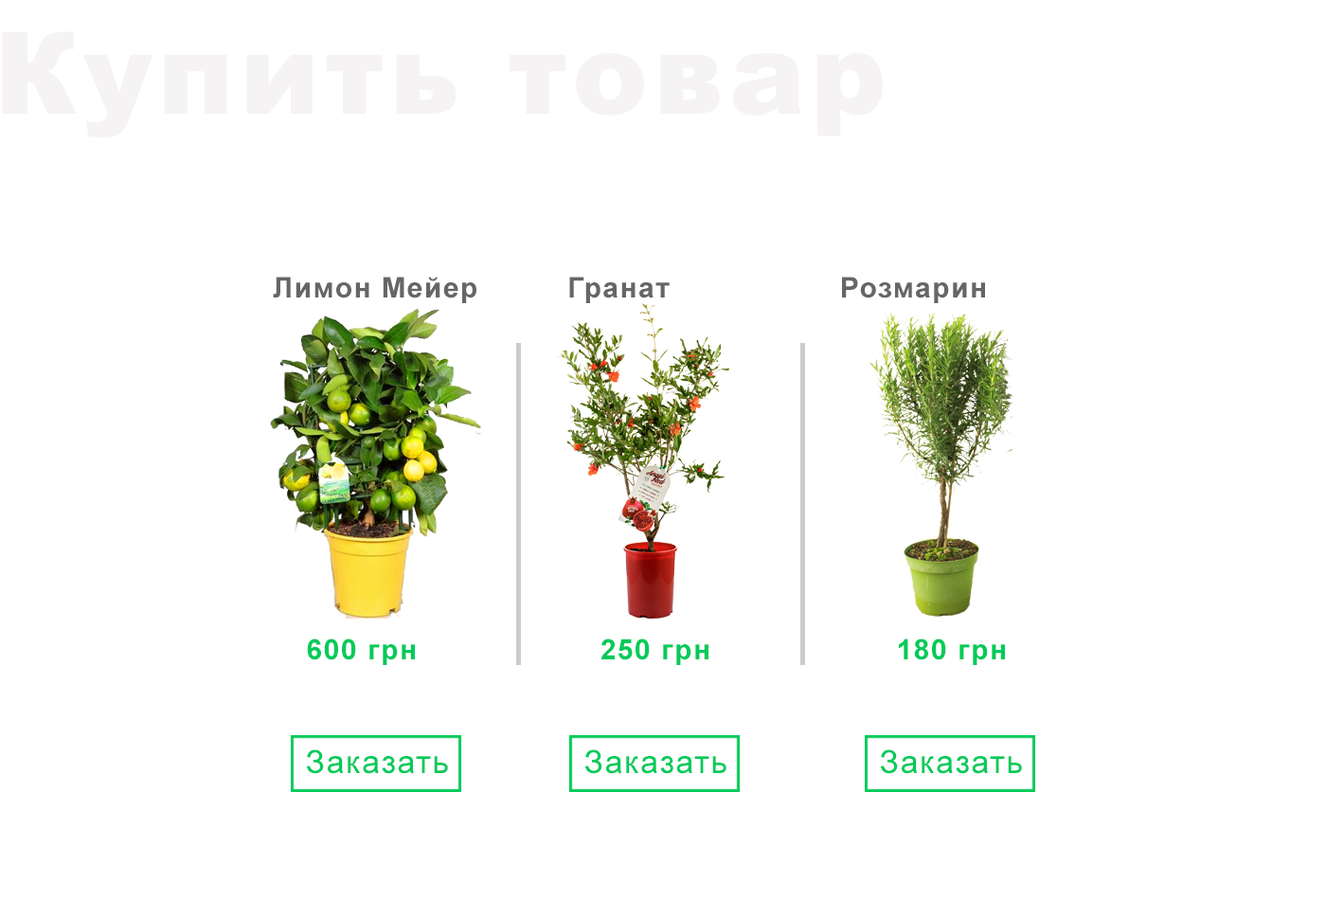
<style>
.page{position:relative;width:1326px;height:900px;background:#ffffff}
.page>*{position:absolute;margin:0}
.t1{font:113.6px "Arial-Black";letter-spacing:0.05em;color:#f5f3f4}
.t2{font:28.4px "Arial-BoldMT";letter-spacing:0.05em;color:#666666}
.t3{font:28.4px "Arial-BoldMT";letter-spacing:0.05em;color:#02cb5a}
.t4{font:32px "ArialMT";letter-spacing:0.05em;color:#02cb5a}
</style>
<div class="page">
<p class="t1" style="left:2px;top:31px;width:880px;height:107px">Купить товар</p>
<p class="t2" style="left:273px;top:276px;width:203px;height:27px">Лимон Мейер</p>
<p class="t2" style="left:569px;top:276px;width:100px;height:27px">Гранат</p>
<p class="t2" style="left:842px;top:276px;width:143px;height:27px">Розмарин</p>
<p class="t3" style="left:307px;top:638px;width:108px;height:27px">600 грн</p>
<p class="t3" style="left:600px;top:638px;width:108px;height:27px">250 грн</p>
<p class="t3" style="left:899px;top:638px;width:106px;height:27px">180 грн</p>
<p class="t4" style="left:306px;top:749px;width:142px;height:25px">Заказать</p>
<p class="t4" style="left:584px;top:749px;width:142px;height:25px">Заказать</p>
<p class="t4" style="left:880px;top:749px;width:142px;height:25px">Заказать</p>
</div>
